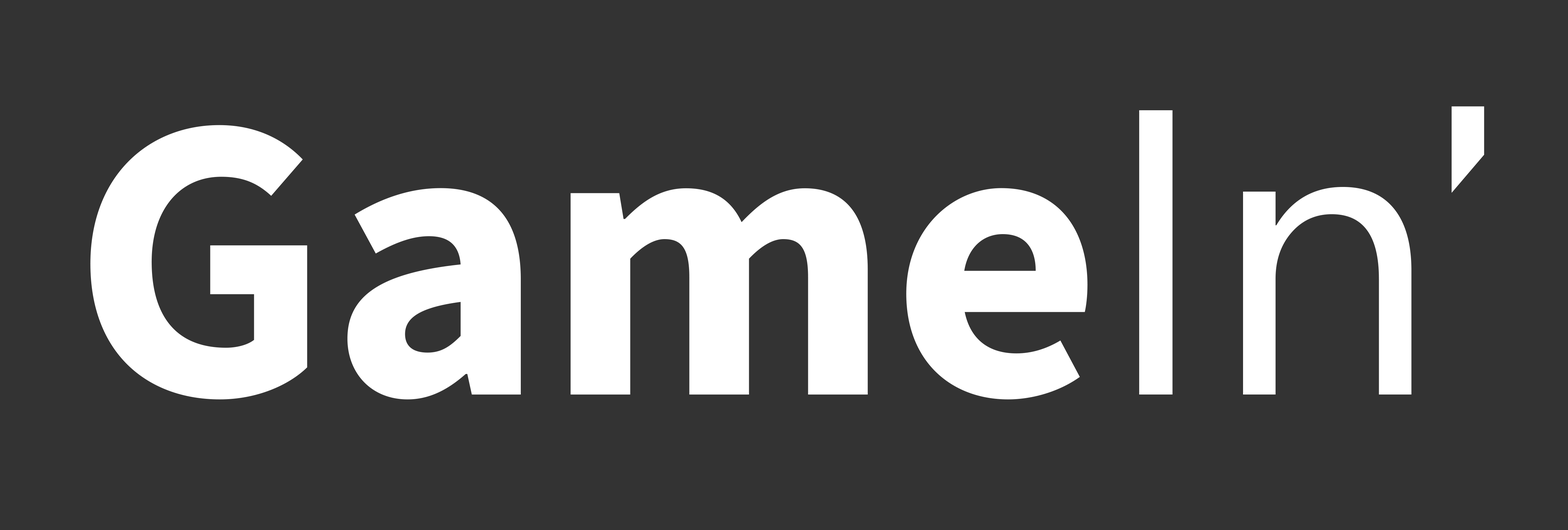
<style>
.page{position:relative;width:1568px;height:530px;background:#333333}
.page>*{position:absolute;margin:0}
.t1{font:405.7px "SourceSansRoman-Bold";color:#ffffff}
.t2{font:405.7px "SegoeUIVariable";color:#ffffff}
.t3{font:405.7px "Bahnschrift-LightCondensed";color:#ffffff}
</style>
<div class="page">
<p class="t1" style="left:90px;top:106px;width:1394px;height:293px">Game<span class="t2">In</span><span class="t3">’</span></p>
</div>
